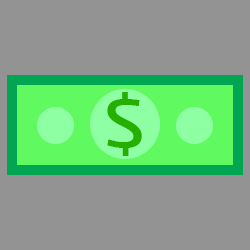
<style>
.page{position:relative;width:250px;height:250px;background:#939393}
.page>*{position:absolute;margin:0}
.t1{font:18.8px "3ds";color:#25b000}
</style>
<div class="page">
<p class="t1" style="left:107px;top:92px;width:35px;height:64px">$</p>
</div>
